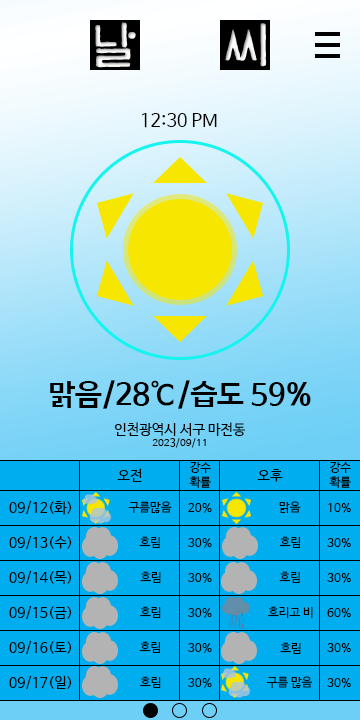
<style>
.page{position:relative;width:360px;height:720px;background:#00aeef}
.page>*{position:absolute;margin:0}
.t1{font:18px "NanumBarunGothic";color:#000000}
.t2{font:30px "NanumBarunGothicBold";color:#000000}
.t3{font:14px "NanumBarunGothic";color:#000000}
.t4{font:10px "NanumBarunGothic";color:#000000}
.t5{font:12px "NanumBarunGothic";color:#000000}
</style>
<div class="page">
<p class="t1" style="left:142px;top:113px;width:75px;height:15px">12:30 PM</p>
<p class="t2" style="left:50px;top:380px;width:261px;height:29px">맑음/28℃/습도 59%</p>
<p class="t3" style="left:114px;top:422px;width:132px;height:26px;text-align:center">인천광역시 서구 마전동<br><span class="t4">2023/09/11</span></p>
<p class="t5" style="left:189px;top:462px;width:22px;height:26px;text-align:center">강수<br>확률</p>
<p class="t5" style="left:329px;top:462px;width:22px;height:26px;text-align:center">강수<br>확률</p>
<p class="t3" style="left:117px;top:468px;width:25px;height:14px">오전</p>
<p class="t3" style="left:257px;top:469px;width:26px;height:13px">오후</p>
<p class="t3" style="left:9px;top:500px;width:63px;height:15px">09/12(화)</p>
<p class="t5" style="left:128px;top:501px;width:44px;height:12px">구름많음</p>
<p class="t5" style="left:188px;top:503px;width:24px;height:10px">20%</p>
<p class="t5" style="left:279px;top:501px;width:22px;height:12px">맑음</p>
<p class="t5" style="left:328px;top:503px;width:23px;height:10px">10%</p>
<p class="t3" style="left:9px;top:535px;width:63px;height:15px">09/13(수)</p>
<p class="t5" style="left:139px;top:536px;width:21px;height:12px">흐림</p>
<p class="t5" style="left:188px;top:538px;width:24px;height:10px">30%</p>
<p class="t5" style="left:279px;top:536px;width:21px;height:12px">흐림</p>
<p class="t5" style="left:327px;top:538px;width:24px;height:10px">30%</p>
<p class="t3" style="left:9px;top:570px;width:63px;height:15px">09/14(목)</p>
<p class="t5" style="left:140px;top:571px;width:21px;height:12px">흐림</p>
<p class="t5" style="left:188px;top:573px;width:24px;height:10px">30%</p>
<p class="t5" style="left:279px;top:571px;width:21px;height:12px">흐림</p>
<p class="t5" style="left:327px;top:573px;width:24px;height:10px">30%</p>
<p class="t3" style="left:9px;top:605px;width:63px;height:15px">09/15(금)</p>
<p class="t5" style="left:140px;top:606px;width:21px;height:12px">흐림</p>
<p class="t5" style="left:268px;top:606px;width:45px;height:12px">흐리고 비</p>
<p class="t5" style="left:188px;top:608px;width:24px;height:10px">30%</p>
<p class="t5" style="left:327px;top:608px;width:24px;height:10px">60%</p>
<p class="t3" style="left:9px;top:640px;width:63px;height:15px">09/16(토)</p>
<p class="t5" style="left:139px;top:641px;width:21px;height:12px">흐림</p>
<p class="t5" style="left:188px;top:643px;width:24px;height:10px">30%</p>
<p class="t5" style="left:280px;top:642px;width:21px;height:12px">흐림</p>
<p class="t5" style="left:327px;top:643px;width:24px;height:10px">30%</p>
<p class="t3" style="left:9px;top:675px;width:63px;height:15px">09/17(일)</p>
<p class="t5" style="left:140px;top:676px;width:21px;height:12px">흐림</p>
<p class="t5" style="left:188px;top:678px;width:24px;height:10px">30%</p>
<p class="t5" style="left:266px;top:676px;width:47px;height:12px">구름 많음</p>
<p class="t5" style="left:327px;top:678px;width:24px;height:10px">30%</p>
</div>
